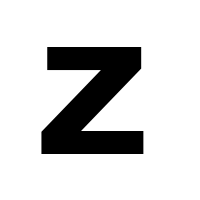
<style>
.page{position:relative;width:200px;height:200px;background:#ffffff}
.page>*{position:absolute;margin:0}
.t1{font:150px "Arial-Black";letter-spacing:-0.03em;color:#000000}
</style>
<div class="page">
<p class="t1" style="left:41px;top:47px;width:103px;height:107px">Z</p>
</div>
